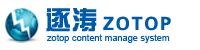
<style>
.page{position:relative;width:200px;height:50px;background:#ffffff}
.page>*{position:absolute;margin:0}
.t1{font:26px "FZZYJW--GB1-0";letter-spacing:0.01em;color:#005aaa}
.t2{font:18px "FZZYJW--GB1-0";letter-spacing:0.1em;color:#005aaa}
.t3{font:9px "ArialMT";letter-spacing:0.01em;color:#005aaa}
</style>
<div class="page">
<p class="t1" style="left:46px;top:8px;width:51px;height:24px">逐涛</p>
<p class="t2" style="left:103px;top:16px;width:68px;height:15px">ZOTOP</p>
<p class="t3" style="left:47px;top:34px;width:123px;height:9px">zotop content manage system</p>
</div>
